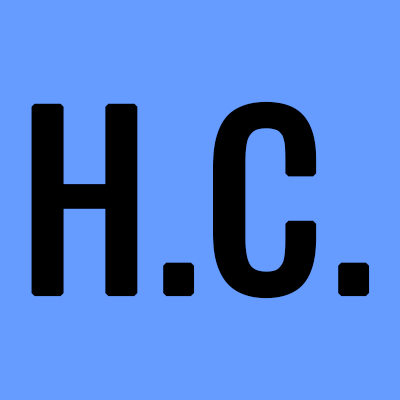
<style>
.page{position:relative;width:400px;height:400px;background:#669cff}
.page>*{position:absolute;margin:0}
.t1{font:230px "Oswald-Regular";color:#000000;font-weight:bold}
</style>
<div class="page">
<p class="t1" style="left:31px;top:101px;width:339px;height:198px">Н.С.</p>
</div>
